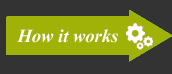
<style>
.page{position:relative;width:172px;height:74px;background:#333333}
.page>*{position:absolute;margin:0}
.t1{font:24px "Kokila-BoldItalic";color:#ffffff}
</style>
<div class="page">
<p class="t1" style="left:17px;top:29px;width:101px;height:14px">How it works</p>
</div>
